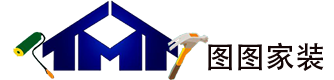
<style>
.page{position:relative;width:334px;height:80px;background:#ffffff}
.page>*{position:absolute;margin:0}
.t1{font:30px "AdobeHeitiStd-Regular";color:#140606}
</style>
<div class="page">
<p class="t1" style="left:208px;top:42px;width:116px;height:29px">图图家装</p>
</div>
